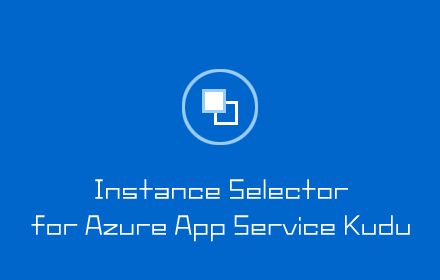
<style>
.page{position:relative;width:440px;height:280px;background:#0066cc}
.page>*{position:absolute;margin:0}
.t1{font:23.9px/35.9px "Makinas-4-Square";color:#ffffff}
</style>
<div class="page">
<p class="t1" style="left:31px;top:179px;width:379px;height:63px;text-align:center">Instance Selector<br>for Azure App Service Kudu</p>
</div>
